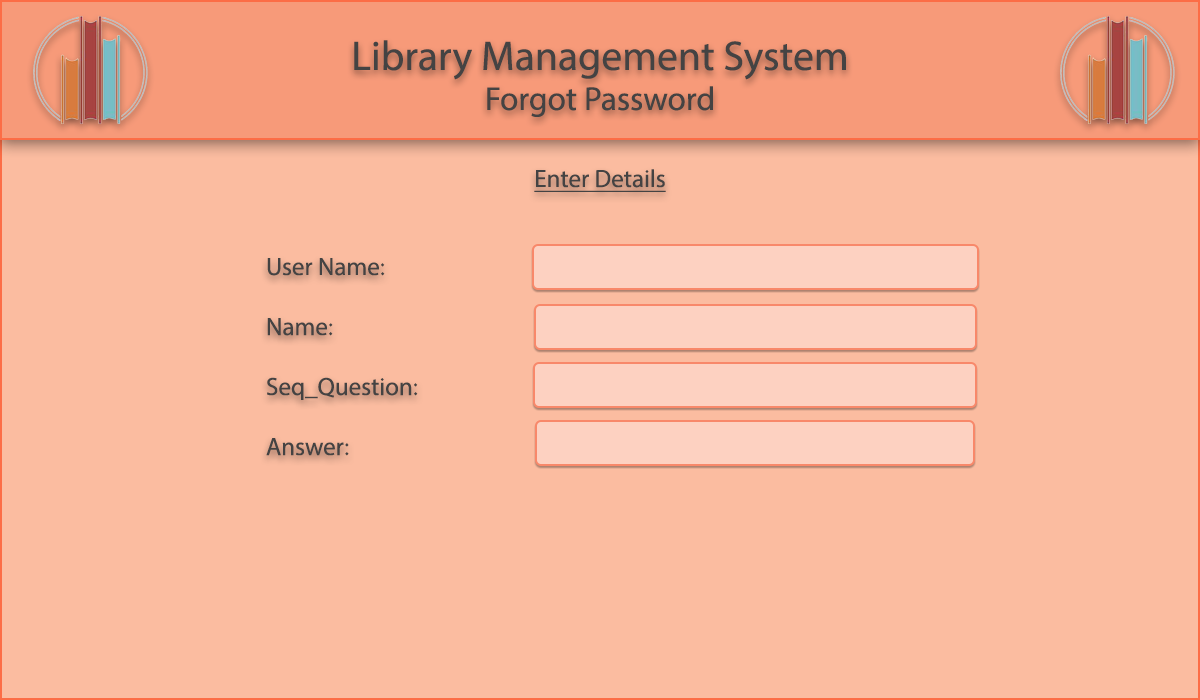
<style>
.page{position:relative;width:1200px;height:700px;background:#fbbca0}
.page>*{position:absolute;margin:0}
.t1{font:41.7px "MyriadPro-Regular";color:#444343}
.t2{font:33.3px "MyriadPro-Regular";color:#444343}
.t3{font:25px "MyriadPro-Regular";color:#444343;text-decoration:underline}
.t4{font:25px "MyriadPro-Regular";color:#444343}
</style>
<div class="page">
<p class="t1" style="left:354px;top:40px;width:492px;height:77px;text-align:center">Library Management System<br><span class="t2">Forgot Password</span></p>
<p class="t3" style="left:534px;top:169px;width:132px;height:23px">Enter Details</p>
<p class="t4" style="left:266px;top:258px;width:152px;height:198px">User Name: <br><br>Name: <br><br>Seq_Question:<br><br>Answer:</p>
</div>
